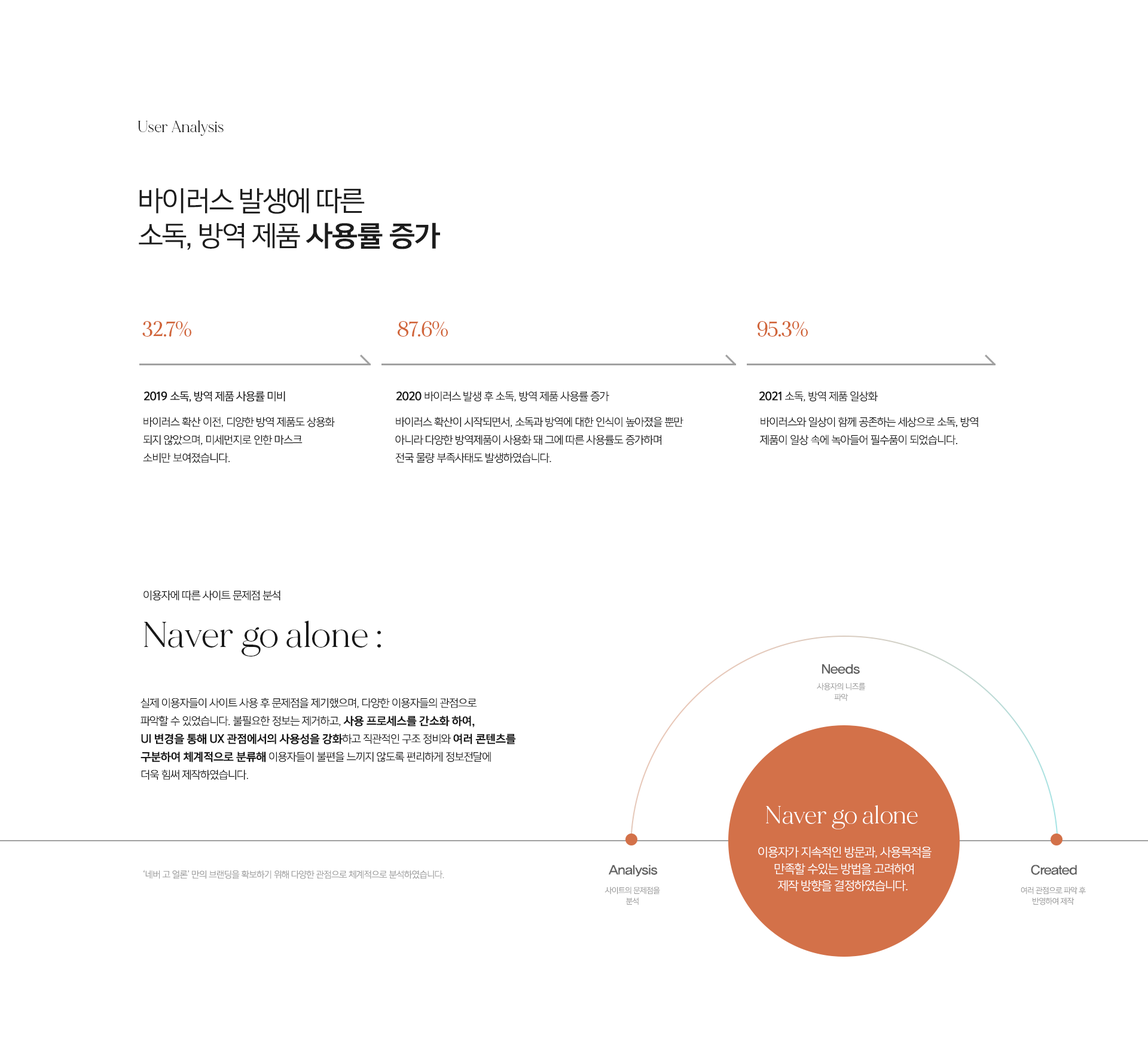
<style>
.page{position:relative;width:1148px;height:1038px;background:#ffffff}
.page>*{position:absolute;margin:0}
.t1{font:16px "MADEMirage";color:#181818;scale:0.95 1}
.t2{font:27.2px/38.8px "YoonGothic740";letter-spacing:-0.05em;color:#1c1c1c}
.t3{font:27.2px/34.9px "YoonGothic740";letter-spacing:-0.05em;color:#1c1c1c}
.t4{font:27.2px/34.9px "YoonGothic770";letter-spacing:-0.05em;color:#1c1c1c}
.t5{font:20.8px "MADEMirage-Medium";letter-spacing:-0.025em;color:#d16539;text-transform:uppercase;scale:0.96 1}
.t6{font:10.8px "YoonGothic740";letter-spacing:-0.05em;color:#141414}
.t7{font:10.8px "YoonGothic770";letter-spacing:-0.05em;color:#141414}
.t8{font:10.8px "YoonGothic730";letter-spacing:-0.05em;color:#141414}
.t9{font:10.8px/17.9px "YoonGothic730";letter-spacing:-0.05em;color:#141414}
.t10{font:35.9px "MADEMirage";color:#181818}
.t11{font:13.1px "YDIYGO330";letter-spacing:-0.025em;color:#616161;scale:1.05 1}
.t12{font:7.8px/10.8px "YoonGothic730";letter-spacing:-0.05em;color:#989898}
.t13{font:10.8px/17.9px "YoonGothic770";letter-spacing:-0.05em;color:#141414}
.t14{font:24.4px "MADEMirage";color:#ffffff}
.t15{font:12px/16.7px "YoonGothic730";letter-spacing:-0.05em;color:#fffefe}
.t16{font:9px "YoonGothic730";letter-spacing:-0.05em;color:#989898}
</style>
<div class="page">
<p class="t1" style="left:138px;top:120px;width:86px;height:16px">User Analysis</p>
<p class="t2" style="left:139px;top:188px;width:301px;height:62px">바이러스 발생에 따른 <br><span class="t3">소독, 방역 제품</span><span class="t4"> 사용률 증가</span></p>
<p class="t5" style="left:142px;top:321px;width:49px;height:16px">32.7%</p>
<p class="t5" style="left:398px;top:321px;width:50px;height:16px">87.6%</p>
<p class="t5" style="left:757px;top:321px;width:51px;height:16px">95.3%</p>
<p class="t6" style="left:144px;top:391px;width:141px;height:12px"><span class="t7">2019 </span>소독, 방역 제품 사용률 미비</p>
<p class="t8" style="left:397px;top:391px;width:212px;height:11px"><span class="t7">2020 </span>바이러스 발생 후 소독, 방역 제품 사용률 증가</p>
<p class="t8" style="left:760px;top:391px;width:118px;height:11px"><span class="t7">2021</span> 소독, 방역 제품 일상화</p>
<p class="t9" style="left:143px;top:417px;width:192px;height:46px">바이러스 확산 이전, 디양한 방역 제품도 상용화 <br>되지 않았으며, 미세먼지로 인한 마스크 <br>소비만 보여졌습니다.</p>
<p class="t9" style="left:395px;top:417px;width:289px;height:47px">바이러스 확산이 시작되면서, 소독과 방역에 대한 인식이 높아졌을 뿐만 <br>아니라 다양한 방역제품이 사용화 돼 그에 따른 사용률도 증가하며 <br>전국 물량 부족사태도 발생하였습니다.</p>
<p class="t9" style="left:760px;top:417px;width:219px;height:29px">바이러스와 일상이 함께 공존하는 세상으로 소독, 방역 <br>제품이 일상 속에 녹아들어 필수품이 되었습니다.</p>
<p class="t8" style="left:144px;top:590px;width:137px;height:11px">이용자에 따른 사이트 문제점 분석</p>
<p class="t10" style="left:144px;top:621px;width:237px;height:36px">Naver go alone :</p>
<p class="t11" style="left:822px;top:664px;width:38px;height:10px">Needs</p>
<p class="t12" style="left:817px;top:683px;width:49px;height:19px;text-align:center">사용자의 니즈를<br>파악</p>
<p class="t9" style="left:141px;top:698px;width:375px;height:82px">실제 이용자들이 사이트 사용 후 문제점을 제기했으며, 다양한 이용자들의 관점으로 <br>파악할 수 있었습니다. 불필요한 정보는 제거하고, <span class="t13">사용 프로세스를 간소화 하여, <br>UI 변경을 통해 UX 관점에서의 사용성을 강화</span>하고 직관적인 구조 정비와 <span class="t13">여러 콘텐츠를 <br>구분하여 체계적으로 분류해</span> 이용자들이 불편을 느끼지 않도록 편리하게 정보전달에 <br>더욱 힘써 제작하였습니다.</p>
<p class="t14" style="left:766px;top:805px;width:152px;height:25px">Naver go alone</p>
<p class="t15" style="left:758px;top:847px;width:174px;height:45px;text-align:center">이용자가 지속적인 방문과, 사용목적을<br>만족할 수있는 방법을 고려하여<br>제작 방향을 결정하였습니다.</p>
<p class="t11" style="left:609px;top:865px;width:49px;height:12px">Analysis</p>
<p class="t11" style="left:1031px;top:865px;width:46px;height:10px">Created</p>
<p class="t16" style="left:144px;top:870px;width:300px;height:9px">‘네버 고 얼론’ 만의 브랜딩을 확보하기 위해 다양한 관점으로 체계적으로 분석하였습니다.</p>
<p class="t12" style="left:605px;top:887px;width:55px;height:19px;text-align:center">사이트의 문제점을<br>분석</p>
<p class="t12" style="left:1021px;top:887px;width:65px;height:19px;text-align:center">여러 관점으로 파악 후 <br>반영하여 제작</p>
</div>
